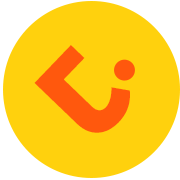
<style>
.page{position:relative;width:180px;height:180px;background:#ffd10d}
.page>*{position:absolute;margin:0}
.t1{font:124.1px "Montserrat-Bold";letter-spacing:0.06em;color:#ff580d;text-transform:uppercase}
</style>
<div class="page">
<p class="t1" style="left:34px;top:45px;width:96px;height:88px;rotate:134deg">j</p>
</div>
